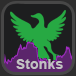
<style>
.page{position:relative;width:76px;height:76px;background:#1d1e1f}
.page>*{position:absolute;margin:0}
.t1{font:14.2px "Arial-BoldMT";color:#c2c2c2}
</style>
<div class="page">
<p class="t1" style="left:16px;top:59px;width:47px;height:10px">Stonks</p>
</div>
